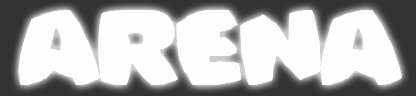
<style>
.page{position:relative;width:416px;height:96px;background:#fefefe}
.page>*{position:absolute;margin:0}
.t1{font:100px "Bomberman";color:#fefefe}
</style>
<div class="page">
<p class="t1" style="left:18px;top:10px;width:384px;height:75px">Arena</p>
<p class="t1" style="left:18px;top:10px;width:384px;height:75px">Arena</p>
</div>
